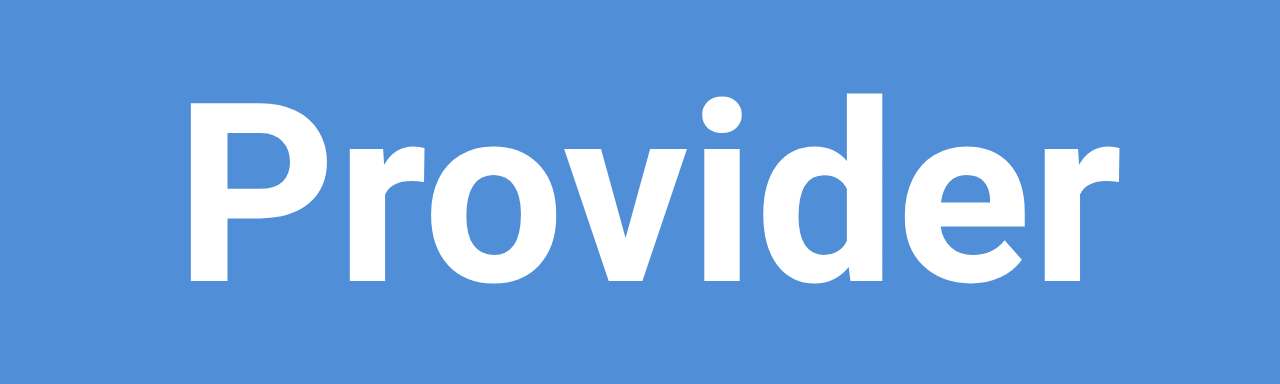
<style>
.page{position:relative;width:1280px;height:384px;background:#508ed8}
.page>*{position:absolute;margin:0}
.t1{font:250px "Roboto-Bold";color:#ffffff}
</style>
<div class="page">
<p class="t1" style="left:190px;top:93px;width:930px;height:191px">Provider</p>
</div>
